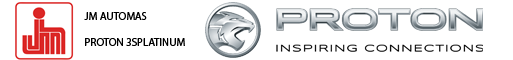
<style>
.page{position:relative;width:513px;height:60px;background:#ffffff}
.page>*{position:absolute;margin:0}
.t1{font:11px "MyriadPro-Regular";color:#000000;text-transform:uppercase}
</style>
<div class="page">
<p class="t1" style="left:84px;top:12px;width:101px;height:34px">JM AUTOMAS<br><br>PROTON 3SPLATINUM</p>
</div>
